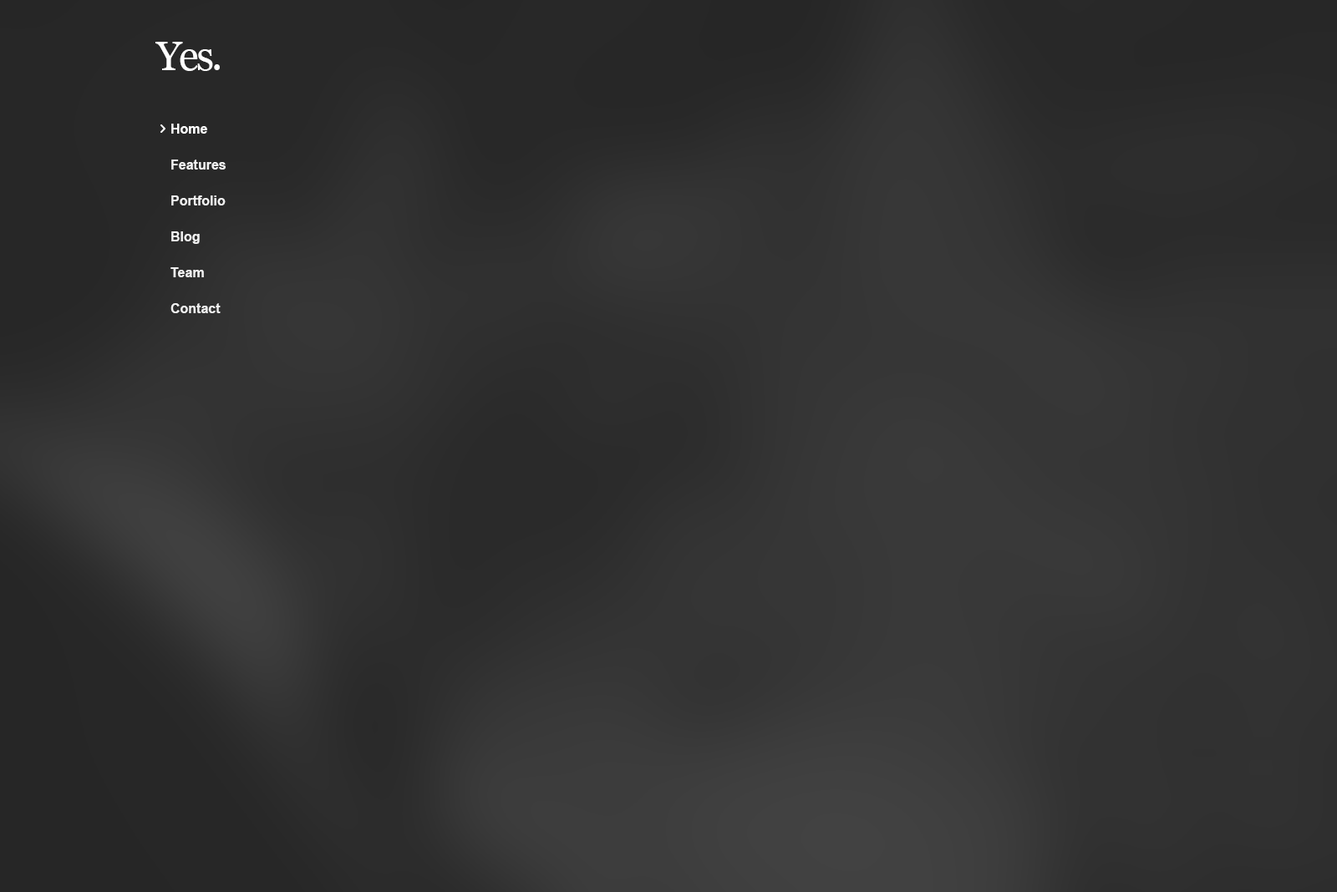
<style>
.page{position:relative;width:1337px;height:892px}
.page>*{position:absolute;margin:0}
.t1{font:40.9px "Georgia";letter-spacing:-0.06em;color:#ffffff}
.t2{font:13.4px/35.9px "Arial-BoldMT";color:#f0f0f0}
.t3{font:13.4px/35.9px "Arial-BoldMT";color:#ffffff}
</style>
<div class="page">
<p class="t1" style="left:155px;top:42px;width:65px;height:29px">Yes.</p>
<p class="t2" style="left:170px;top:124px;width:56px;height:189px"><span class="t3">Home<br></span>Features<br>Portfolio<br>Blog<br>Team<br>Contact</p>
</div>
